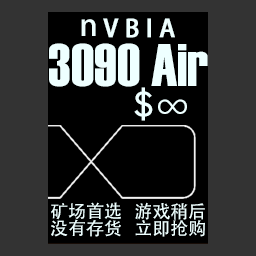
<style>
.page{position:relative;width:256px;height:256px;background:#333333}
.page>*{position:absolute;margin:0}
.t1{font:30px "AdobeHeitiStd-Regular";color:#eeffff}
.t2{font:24px "AdobeHeitiStd-Regular";color:#eeffff;font-weight:bold}
.t3{font:60px "Haettenschweiler";color:#eeffff}
.t4{font:48px "OratorStd";color:#eeffff}
.t5{font:18px "AdobeHeitiStd-Regular";color:#eeffff}
</style>
<div class="page">
<p class="t1" style="left:81px;top:19px;width:15px;height:17px">n</p>
<p class="t2" style="left:103px;top:18px;width:72px;height:20px">V B I A</p>
<p class="t3" style="left:49px;top:43px;width:159px;height:44px">3090 Air</p>
<p class="t4" style="left:134px;top:87px;width:53px;height:34px">$∞</p>
<p class="t5" style="left:51px;top:202px;width:154px;height:35px;text-align:center">矿场首选   游戏稍后<br>没有存货   立即抢购</p>
</div>
